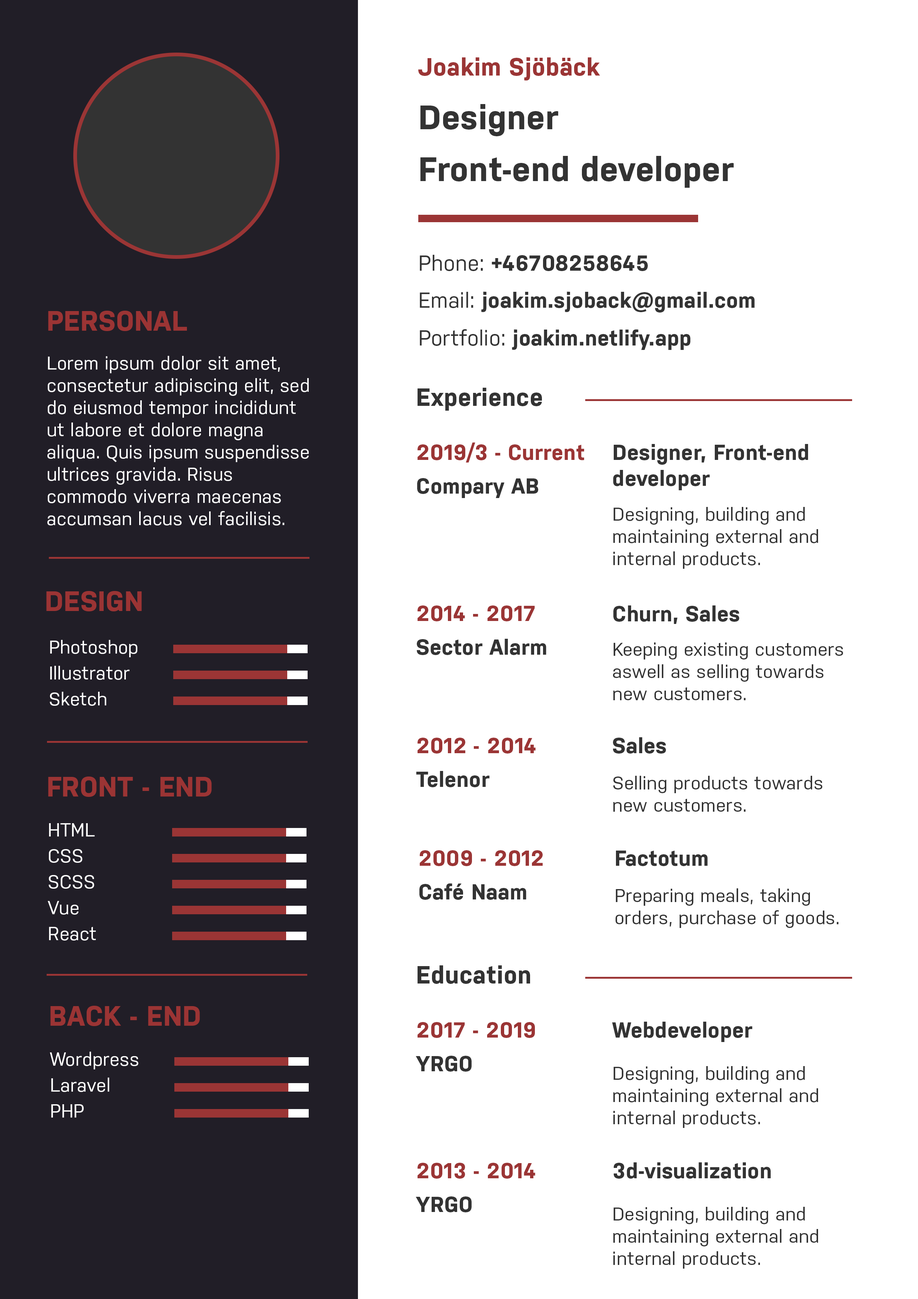
<style>
.page{position:relative;width:918px;height:1299px;background:#ffffff}
.page>*{position:absolute;margin:0}
.t1{font:24.7px "Nudista-Bold";letter-spacing:0.01em;color:#9b3535}
.t2{font:34px "Nudista-Bold";letter-spacing:0.01em;color:#333333}
.t3{font:21.6px "Nudista-Bold";letter-spacing:0.01em;color:#333333}
.t4{font:21.6px "Nudista";letter-spacing:0.01em;color:#333333}
.t5{font:27.8px "Nudista-Bold";letter-spacing:0.01em;color:#9b3434}
.t6{font:18.5px "Nudista";letter-spacing:0.01em;color:#ffffff}
.t7{font:24.7px "Nudista-Bold";letter-spacing:0.01em;color:#333333}
.t8{font:21.6px "Nudista-Bold";letter-spacing:0.01em;color:#9b3535}
.t9{font:18.5px "Nudista";letter-spacing:0.01em;color:#333333}
</style>
<div class="page">
<p class="t1" style="left:418px;top:57px;width:182px;height:24px">Joakim Sjöbäck</p>
<p class="t2" style="left:420px;top:104px;width:138px;height:32px">Designer</p>
<p class="t2" style="left:420px;top:156px;width:314px;height:32px">Front-end developer</p>
<p class="t3" style="left:420px;top:255px;width:228px;height:16px"><span class="t4">Phone: </span>+46708258645</p>
<p class="t3" style="left:420px;top:291px;width:335px;height:21px"><span class="t4">Email: </span>joakim.sjoback@gmail.com</p>
<p class="t5" style="left:48px;top:311px;width:139px;height:20px">PERSONAL</p>
<p class="t3" style="left:420px;top:329px;width:270px;height:21px"><span class="t4">Portfolio: </span>joakim.netlify.app</p>
<p class="t6" style="left:47px;top:356px;width:262px;height:169px">Lorem ipsum dolor sit amet, consectetur adipiscing elit, sed do eiusmod tempor incididunt ut labore et dolore magna aliqua. Quis ipsum suspendisse ultrices gravida. Risus commodo viverra maecenas accumsan lacus vel facilisis.</p>
<p class="t7" style="left:418px;top:388px;width:124px;height:23px">Experience</p>
<p class="t8" style="left:418px;top:442px;width:166px;height:20px">2019/3 - Current</p>
<p class="t3" style="left:613px;top:444px;width:195px;height:46px">Designer, Front-end developer</p>
<p class="t3" style="left:417px;top:478px;width:121px;height:20px">Compary AB</p>
<p class="t9" style="left:613px;top:507px;width:205px;height:62px">Designing, building and maintaining external and internal products.</p>
<p class="t5" style="left:46px;top:591px;width:96px;height:20px">DESIGN</p>
<p class="t8" style="left:418px;top:605px;width:117px;height:16px">2014 - 2017</p>
<p class="t3" style="left:613px;top:605px;width:126px;height:19px">Churn, Sales</p>
<p class="t6" style="left:50px;top:640px;width:87px;height:17px">Photoshop</p>
<p class="t3" style="left:417px;top:639px;width:129px;height:16px">Sector Alarm</p>
<p class="t9" style="left:613px;top:642px;width:230px;height:58px">Keeping existing customers aswell as selling towards new customers.</p>
<p class="t6" style="left:50px;top:666px;width:80px;height:14px">Illustrator</p>
<p class="t6" style="left:50px;top:692px;width:56px;height:14px">Sketch</p>
<p class="t8" style="left:418px;top:737px;width:118px;height:16px">2012 - 2014</p>
<p class="t3" style="left:613px;top:737px;width:53px;height:16px">Sales</p>
<p class="t3" style="left:416px;top:771px;width:74px;height:16px">Telenor</p>
<p class="t5" style="left:48px;top:776px;width:164px;height:21px">FRONT - END</p>
<p class="t9" style="left:613px;top:776px;width:210px;height:36px">Selling products towards new customers.</p>
<p class="t6" style="left:49px;top:823px;width:46px;height:13px">HTML</p>
<p class="t6" style="left:49px;top:849px;width:34px;height:14px">CSS</p>
<p class="t8" style="left:420px;top:850px;width:123px;height:16px">2009 - 2012</p>
<p class="t3" style="left:616px;top:850px;width:92px;height:16px">Factotum</p>
<p class="t6" style="left:48px;top:875px;width:46px;height:14px">SCSS</p>
<p class="t3" style="left:419px;top:883px;width:107px;height:17px">Café Naam</p>
<p class="t9" style="left:616px;top:888px;width:223px;height:40px">Preparing meals, taking orders, purchase of goods.</p>
<p class="t6" style="left:48px;top:901px;width:30px;height:13px">Vue</p>
<p class="t6" style="left:49px;top:927px;width:47px;height:13px">React</p>
<p class="t7" style="left:418px;top:965px;width:112px;height:19px">Education</p>
<p class="t5" style="left:50px;top:1006px;width:150px;height:20px">BACK - END</p>
<p class="t8" style="left:418px;top:1022px;width:117px;height:16px">2017 - 2019</p>
<p class="t3" style="left:612px;top:1021px;width:141px;height:21px">Webdeveloper</p>
<p class="t6" style="left:50px;top:1051px;width:88px;height:18px">Wordpress</p>
<p class="t3" style="left:416px;top:1056px;width:56px;height:15px">YRGO</p>
<p class="t9" style="left:613px;top:1066px;width:205px;height:62px">Designing, building and maintaining external and internal products.</p>
<p class="t6" style="left:51px;top:1077px;width:58px;height:15px">Laravel</p>
<p class="t6" style="left:51px;top:1104px;width:33px;height:13px">PHP</p>
<p class="t8" style="left:418px;top:1162px;width:117px;height:16px">2013 - 2014</p>
<p class="t3" style="left:614px;top:1162px;width:157px;height:16px">3d-visualization</p>
<p class="t3" style="left:416px;top:1196px;width:56px;height:16px">YRGO</p>
<p class="t9" style="left:613px;top:1207px;width:205px;height:61px">Designing, building and maintaining external and internal products.</p>
</div>
